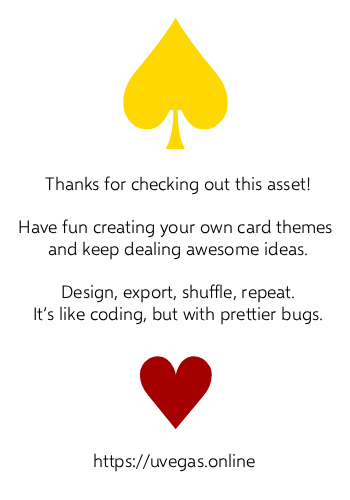
<style>
.page{position:relative;width:350px;height:500px;background:#ffffff}
.page>*{position:absolute;margin:0}
.t1{font:179.7px "DejaVuSans";color:#ffd703}
.t2{font:18px "Selawik-Semilight";color:#000000}
.t3{font:100px "DejaVuSans";color:#a40000}
.t4{font:300px "DejaVuSans";color:#a40000}
</style>
<div class="page">
<p class="t1" style="left:123px;top:18px;width:105px;height:131px">♠️</p>
<p class="t2" style="left:19px;top:176px;width:313px;height:149px;text-align:center">Thanks for checking out this asset!<br><br>Have fun creating your own card themes <br>and keep dealing awesome ideas.<br><br>Design, export, shuffle, repeat.<br>It’s like coding, but with prettier bugs.</p>
<p class="t3" style="left:139px;top:356px;width:73px;height:73px">♥<span class="t4">️</span></p>
<p class="t2" style="left:94px;top:453px;width:161px;height:19px">https://uvegas.online</p>
</div>
